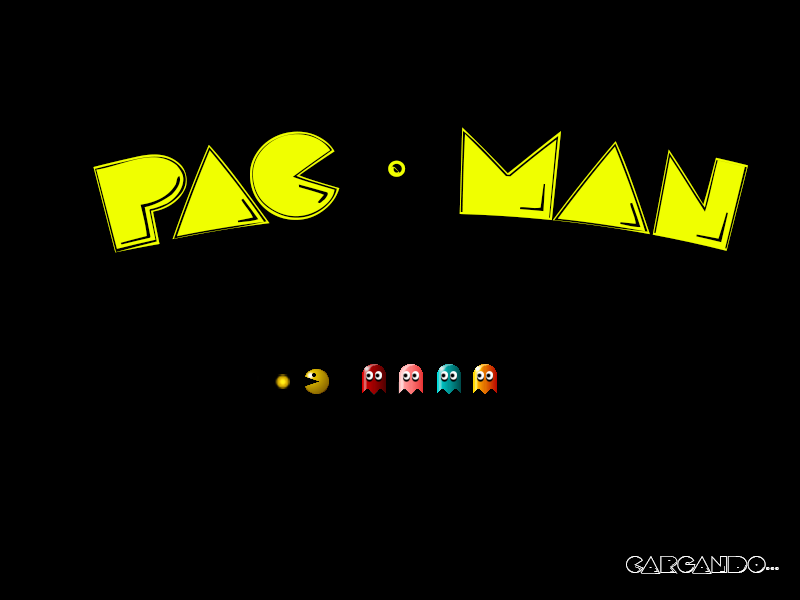
<style>
.page{position:relative;width:800px;height:600px;background:#000000}
.page>*{position:absolute;margin:0}
.t1{font:90px "PacFont";color:#f0ff00}
.t2{font:18px "PacFont";color:#ffffff}
</style>
<div class="page">
<p class="t1" style="left:93px;top:127px;width:655px;height:126px">pac - man</p>
<p class="t2" style="left:626px;top:556px;width:153px;height:18px">CARGANDO...</p>
</div>
